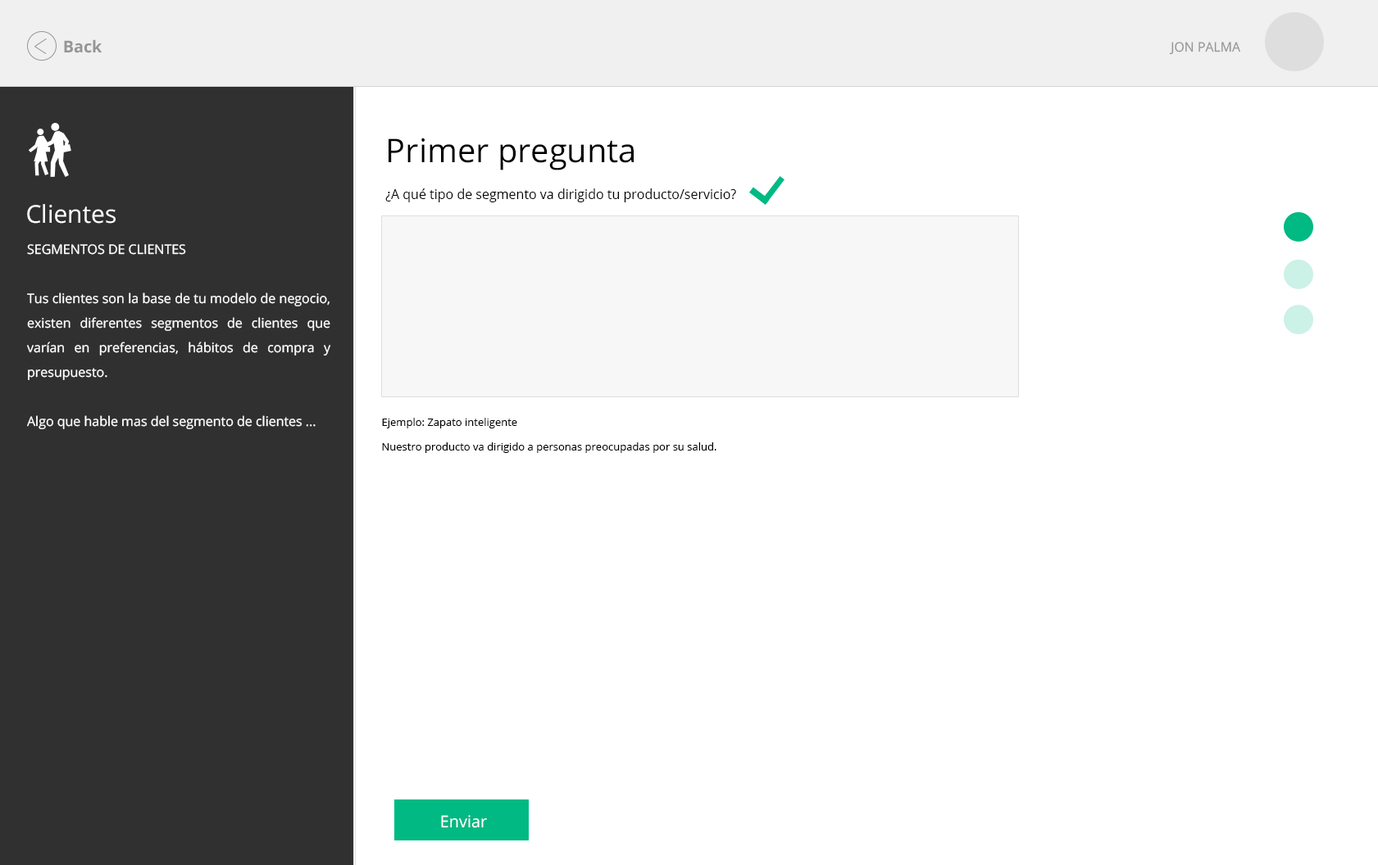
<style>
.page{position:relative;width:1378px;height:865px;background:#ffffff}
.page>*{position:absolute;margin:0}
.t1{font:16.4px "OpenSans-Bold";color:#959595}
.t2{font:13.1px "OpenSans";color:#959595}
.t3{font:32.8px "OpenSans";color:#000000}
.t4{font:13.1px "OpenSans";color:#000000}
.t5{font:24.6px "OpenSans";color:#ffffff}
.t6{font:13.1px/24.6px "OpenSans";color:#ffffff}
.t7{font:10.7px/24.6px "OpenSans";color:#000000}
.t8{font:16.4px "OpenSans";color:#ffffff}
</style>
<div class="page">
<p class="t1" style="left:64px;top:39px;width:38px;height:14px">Back</p>
<p class="t2" style="left:1169px;top:42px;width:71px;height:13px">JON PALMA</p>
<p class="t3" style="left:388px;top:138px;width:246px;height:32px">Primer pregunta</p>
<p class="t4" style="left:385px;top:189px;width:351px;height:13px">¿A qué tipo de segmento va dirigido tu producto/servicio?</p>
<p class="t5" style="left:27px;top:204px;width:89px;height:20px">Clientes</p>
<p class="t6" style="left:27px;top:244px;width:304px;height:185px;text-align:justify">SEGMENTOS DE CLIENTES<br><br>Tus clientes son la base de tu modelo de negocio, existen diferentes segmentos de clientes que varían en preferencias, hábitos de compra y presupuesto.<br><br>Algo que hable mas del segmento de clientes ...</p>
<p class="t7" style="left:382px;top:418px;width:334px;height:35px;text-align:justify">Ejemplo: Zapato inteligente<br>Nuestro producto va dirigido a personas preocupadas por su salud.</p>
<p class="t8" style="left:441px;top:816px;width:46px;height:13px">Enviar</p>
</div>
